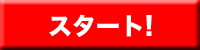
<style>
.page{position:relative;width:200px;height:50px;background:#ff0000}
.page>*{position:absolute;margin:0}
.t1{font:24px "HiraKakuStdN-W8";color:#ffffff}
</style>
<div class="page">
<p class="t1" style="left:49px;top:14px;width:103px;height:24px">スタート!</p>
</div>
